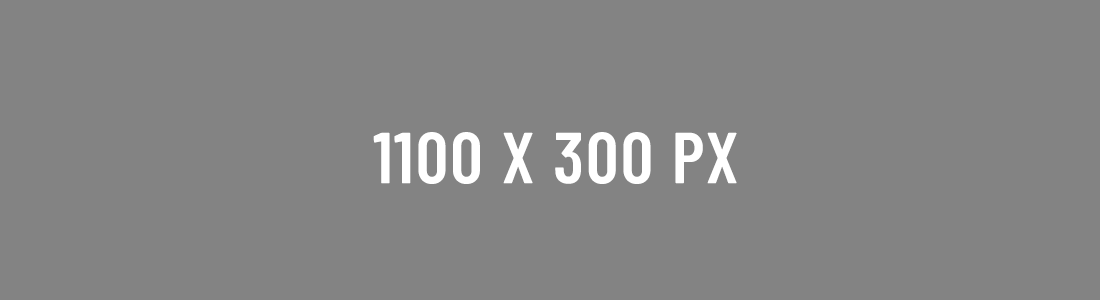
<style>
.page{position:relative;width:1100px;height:300px;background:#838383}
.page>*{position:absolute;margin:0}
.t1{font:72px "BarlowCondensed-SemiBold";letter-spacing:0.03em;color:#ffffff}
</style>
<div class="page">
<p class="t1" style="left:373px;top:132px;width:364px;height:52px">1100 X 300 PX</p>
</div>
